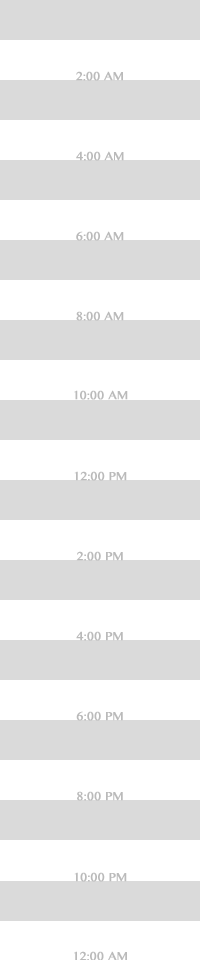
<style>
.page{position:relative;width:200px;height:960px;background:#dadada}
.page>*{position:absolute;margin:0}
.t1{font:14px "KhmerMN";color:#bababa;font-weight:bold}
</style>
<div class="page">
<p class="t1" style="left:76px;top:71px;width:47px;height:10px">2:00 AM</p>
<p class="t1" style="left:76px;top:151px;width:48px;height:10px">4:00 AM</p>
<p class="t1" style="left:76px;top:231px;width:48px;height:10px">6:00 AM</p>
<p class="t1" style="left:76px;top:311px;width:48px;height:10px">8:00 AM</p>
<p class="t1" style="left:74px;top:390px;width:54px;height:10px">10:00 AM</p>
<p class="t1" style="left:74px;top:471px;width:53px;height:10px">12:00 PM</p>
<p class="t1" style="left:76px;top:551px;width:47px;height:10px">2:00 PM</p>
<p class="t1" style="left:76px;top:631px;width:47px;height:10px">4:00 PM</p>
<p class="t1" style="left:76px;top:711px;width:47px;height:10px">6:00 PM</p>
<p class="t1" style="left:77px;top:791px;width:46px;height:10px">8:00 PM</p>
<p class="t1" style="left:74px;top:872px;width:53px;height:10px">10:00 PM</p>
<p class="t1" style="left:74px;top:951px;width:53px;height:10px">12:00 AM</p>
</div>
